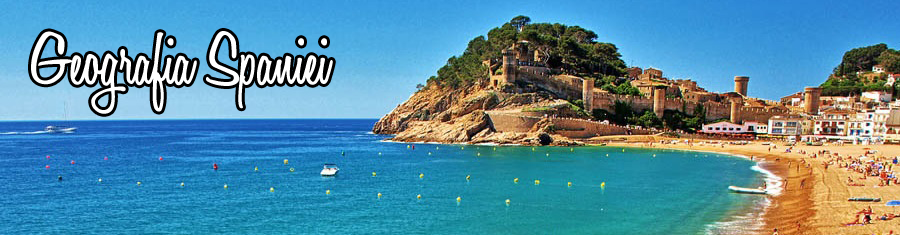
<style>
.page{position:relative;width:900px;height:235px}
.page>*{position:absolute;margin:0}
.t1{font:78.5px "HoneyScript-SemiBold";color:#ffffff}
</style>
<div class="page">
<p class="t1" style="left:31px;top:31px;width:302px;height:83px">Geografia Spaniei</p>
</div>
